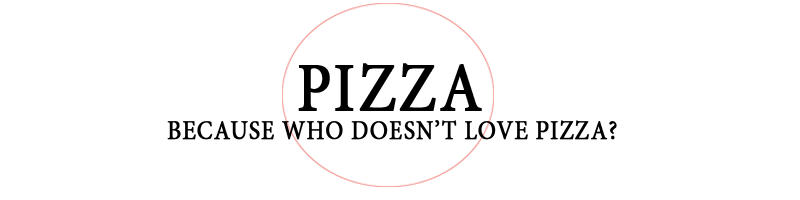
<style>
.page{position:relative;width:800px;height:200px;background:#ffffff}
.page>*{position:absolute;margin:0}
.t1{font:70px "MinionPro-Regular";letter-spacing:0.03em;color:#000000;font-weight:bold;scale:0.87 1}
.t2{font:27px "MinionPro-Regular";letter-spacing:0.03em;color:#000000;font-weight:bold;scale:0.87 1}
</style>
<div class="page">
<p class="t1" style="left:298px;top:63px;width:184px;height:48px">PIZZA</p>
<p class="t2" style="left:167px;top:120px;width:450px;height:20px">BECAUSE WHO DOESN’T LOVE PIZZA?</p>
</div>
